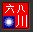
<style>
.page{position:relative;width:33px;height:32px;background:#f20000}
.page>*{position:absolute;margin:0}
.t1{font:10.4px "SimSun";color:#ffffff}
.t2{font:11.7px "SimSun";color:#ffffff}
</style>
<div class="page">
<p class="t1" style="left:5px;top:4px;width:20px;height:9px">六八</p>
<p class="t2" style="left:16px;top:15px;width:11px;height:12px">川</p>
</div>
